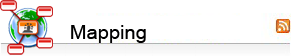
<style>
.page{position:relative;width:291px;height:56px;background:#ffffff}
.page>*{position:absolute;margin:0}
.t1{font:18.7px "ArialMT";color:#000000;scale:1.08 1}
</style>
<div class="page">
<p class="t1" style="left:71px;top:25px;width:75px;height:18px">Mapping</p>
</div>
